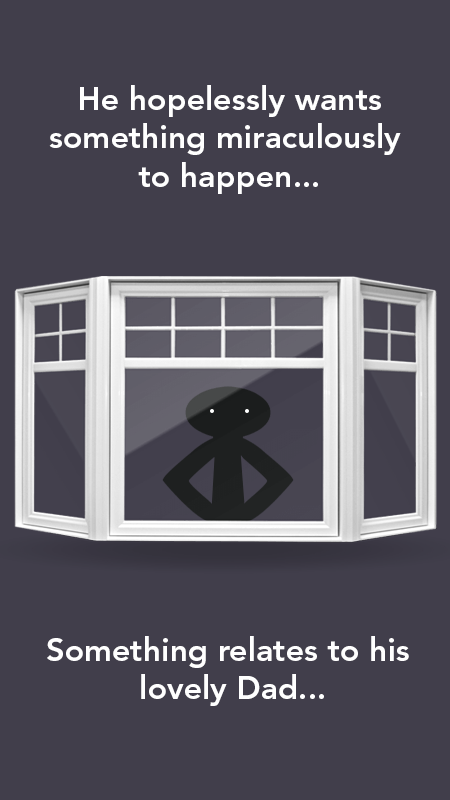
<style>
.page{position:relative;width:450px;height:800px;background:#413e4b}
.page>*{position:absolute;margin:0}
.t1{font:32px "AvenirLTStd-Heavy";color:#ffffff}
</style>
<div class="page">
<p class="t1" style="left:49px;top:85px;width:352px;height:109px;text-align:center">He hopelessly wants<br>something miraculously <br>to happen...</p>
<p class="t1" style="left:47px;top:636px;width:362px;height:70px;text-align:center">Something relates to his<br> lovely Dad...</p>
</div>
